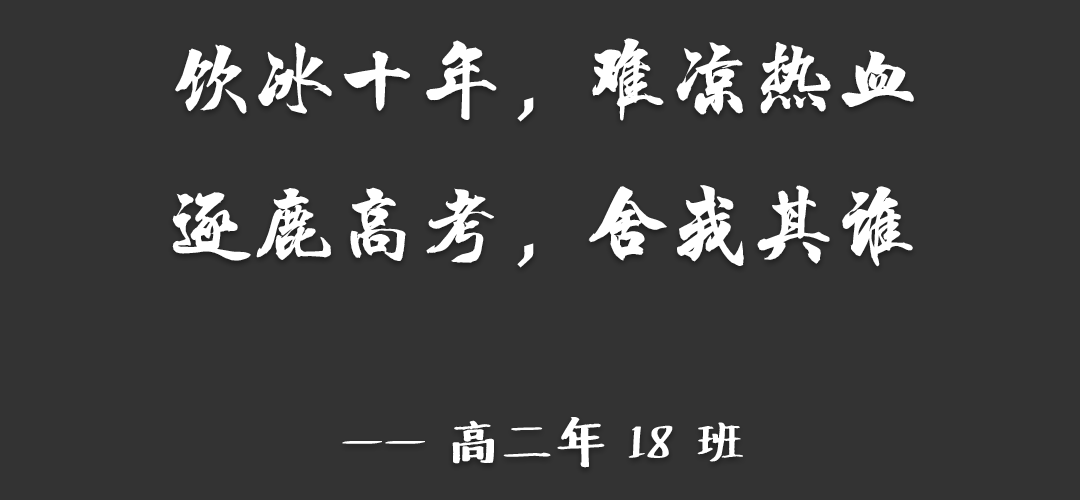
<style>
.page{position:relative;width:1080px;height:500px;background:#333333}
.page>*{position:absolute;margin:0}
.t1{font:83.3px "HYChengXingJ";color:#ffffff}
.t2{font:50px "Undefined";color:#ffffff}
</style>
<div class="page">
<p class="t1" style="left:172px;top:38px;width:742px;height:430px;text-align:center">饮冰十年，难凉热血<br>逐鹿高考，舍我其谁<br><span class="t2"><br>—— 高二年 18 班</span></p>
</div>
